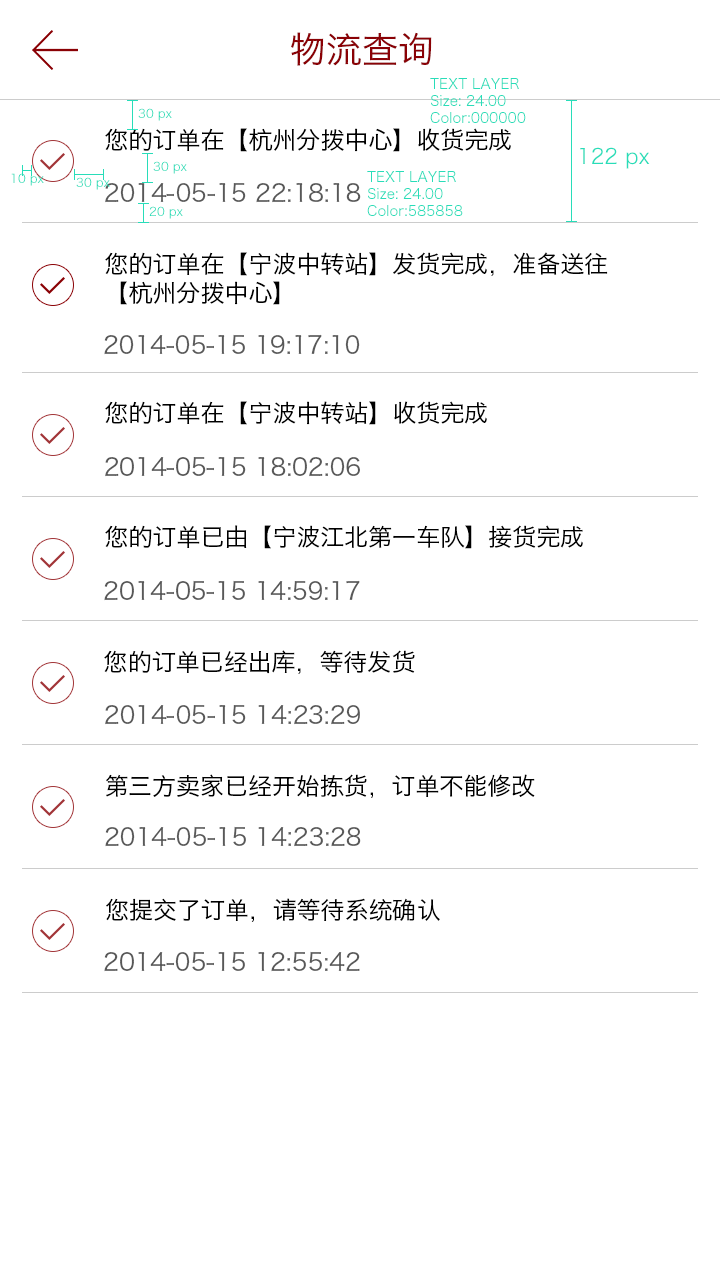
<style>
.page{position:relative;width:720px;height:1280px;background:#ffffff}
.page>*{position:absolute;margin:0}
.t1{font:36px "HiraginoSansGB-W3";color:#8a0105}
.t2{font:14px "HiraginoSansGB-W3";color:#28ddb9}
.t3{font:12px "HiraginoSansGB-W3";color:#28ddb9}
.t4{font:24px "HiraginoSansGB-W3";color:#000000}
.t5{font:20.8px "HiraginoSansGB-W3";color:#28ddb9}
.t6{font:24px "HiraginoSansGB-W3";color:#585858}
.t7{font:24.1px "HiraginoSansGB-W3";color:#585858}
</style>
<div class="page">
<p class="t1" style="left:291px;top:32px;width:141px;height:34px">物流查询</p>
<p class="t2" style="left:430px;top:78px;width:96px;height:45px">TEXT LAYER<br>Size: 24.00<br>Color:000000</p>
<p class="t3" style="left:138px;top:108px;width:34px;height:13px">30 px</p>
<p class="t4" style="left:105px;top:128px;width:406px;height:24px">您的订单在【杭州分拨中心】收货完成</p>
<p class="t5" style="left:580px;top:147px;width:70px;height:22px">122 px</p>
<p class="t3" style="left:153px;top:161px;width:34px;height:13px">30 px</p>
<p class="t3" style="left:11px;top:173px;width:33px;height:13px">10 px</p>
<p class="t2" style="left:367px;top:171px;width:96px;height:45px">TEXT LAYER<br>Size: 24.00<br>Color:585858</p>
<p class="t3" style="left:76px;top:177px;width:34px;height:13px">30 px</p>
<p class="t6" style="left:105px;top:183px;width:256px;height:20px">2014-05-15 22:18:18</p>
<p class="t3" style="left:149px;top:206px;width:34px;height:13px">20 px</p>
<p class="t4" style="left:105px;top:252px;width:503px;height:53px">您的订单在【宁波中转站】发货完成，准备送往【杭州分拨中心】</p>
<p class="t6" style="left:104px;top:334px;width:256px;height:21px">2014-05-15 19:17:10</p>
<p class="t4" style="left:105px;top:401px;width:382px;height:24px">您的订单在【宁波中转站】收货完成</p>
<p class="t6" style="left:105px;top:457px;width:255px;height:20px">2014-05-15 18:02:06</p>
<p class="t4" style="left:105px;top:525px;width:478px;height:24px">您的订单已由【宁波江北第一车队】接货完成</p>
<p class="t6" style="left:104px;top:580px;width:256px;height:21px">2014-05-15 14:59:17</p>
<p class="t4" style="left:104px;top:650px;width:311px;height:24px">您的订单已经出库，等待发货</p>
<p class="t6" style="left:105px;top:705px;width:255px;height:20px">2014-05-15 14:23:29</p>
<p class="t4" style="left:106px;top:774px;width:429px;height:24px">第三方卖家已经开始拣货，订单不能修改</p>
<p class="t7" style="left:105px;top:826px;width:256px;height:21px">2014-05-15 14:23:28</p>
<p class="t4" style="left:106px;top:898px;width:334px;height:24px">您提交了订单，请等待系统确认</p>
<p class="t6" style="left:104px;top:951px;width:256px;height:21px">2014-05-15 12:55:42</p>
</div>
